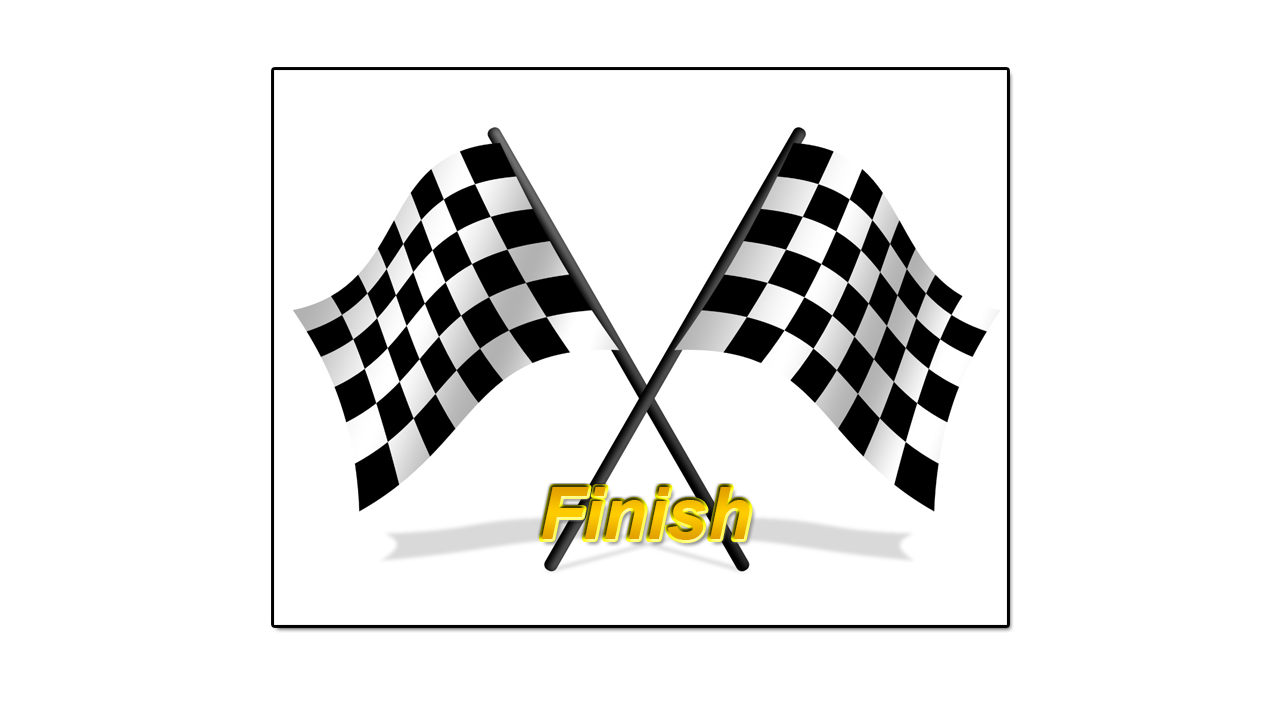
<style>
.page{position:relative;width:1280px;height:720px;background:#ffffff}
.page>*{position:absolute;margin:0}
.t1{font:72px "Arial-BoldItalicMT";color:#f5bc00}
</style>
<div class="page">
<p class="t1" style="left:541px;top:487px;width:209px;height:53px">Finish</p>
</div>
